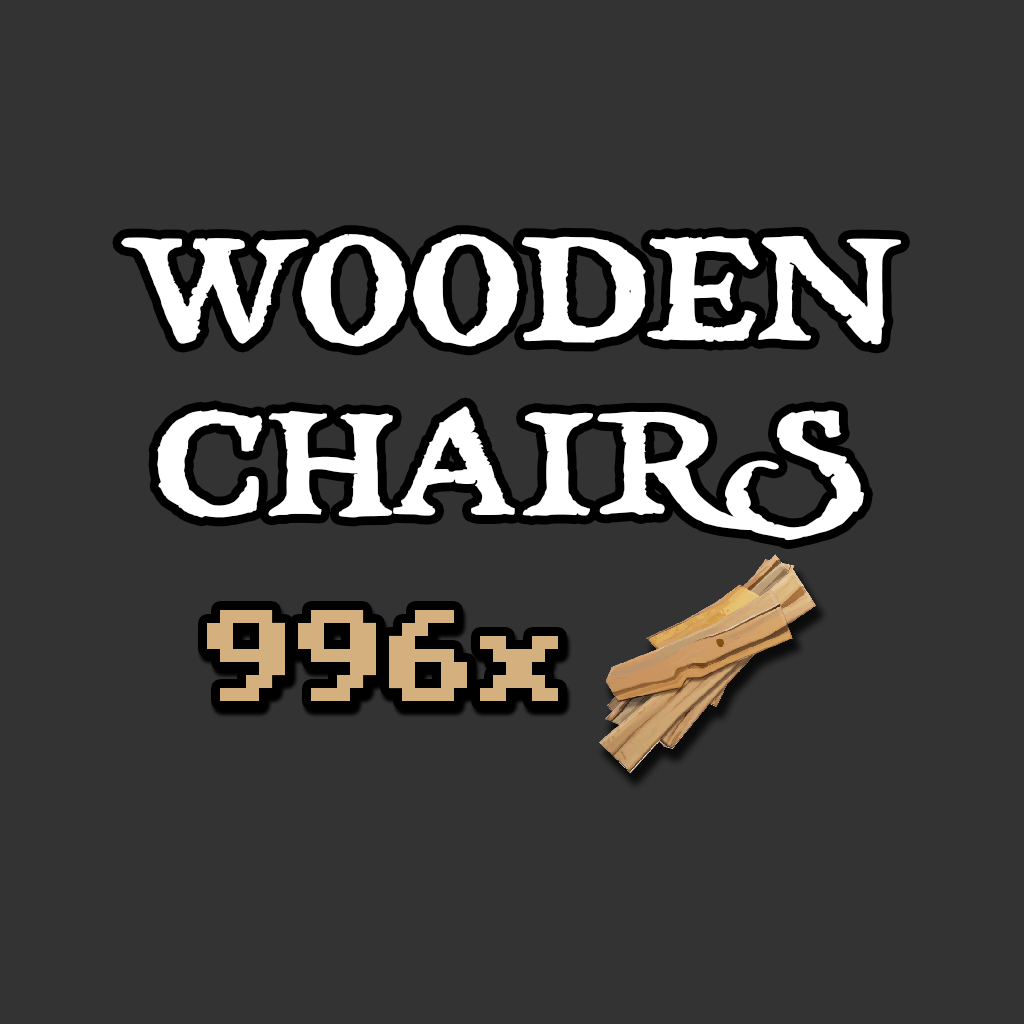
<style>
.page{position:relative;width:1024px;height:1024px;background:#333333}
.page>*{position:absolute;margin:0}
.t1{font:145.8px "treasuremap";color:#ffffff}
.t2{font:130px "Minecraft-Bold";color:#d4b07f}
</style>
<div class="page">
<p class="t1" style="left:121px;top:234px;width:780px;height:307px;text-align:center">WOODEN <br>CHAIRS</p>
<p class="t2" style="left:207px;top:610px;width:351px;height:91px">996x</p>
</div>
